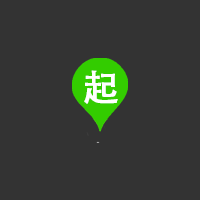
<style>
.page{position:relative;width:200px;height:200px;background:#333333}
.page>*{position:absolute;margin:0}
.t1{font:36px "AdobeHeitiStd-Regular";color:#ffffff;font-weight:bold}
</style>
<div class="page">
<p class="t1" style="left:84px;top:70px;width:34px;height:34px">起</p>
</div>
